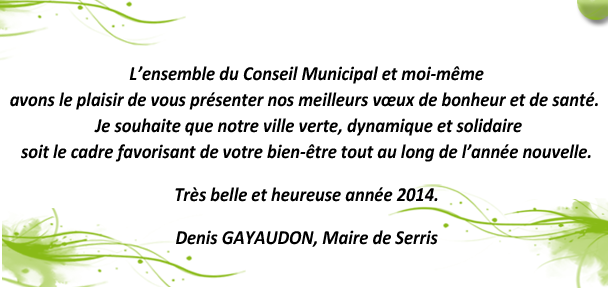
<style>
.page{position:relative;width:608px;height:288px;background:#ffffff}
.page>*{position:absolute;margin:0}
.t1{font:20px/26px "Calibri-BoldItalic";color:#000000;scale:0.92 1}
</style>
<div class="page">
<p class="t1" style="left:10px;top:66px;width:588px;height:181px;text-align:center">L’ensemble du Conseil Municipal et moi-même<br>avons le plaisir de vous présenter nos meilleurs vœux de bonheur et de santé. <br> Je souhaite que notre ville verte, dynamique et solidaire<br>soit le cadre favorisant de votre bien-être tout au long de l’année nouvelle.<br><br>Très belle et heureuse année 2014.<br><br>Denis GAYAUDON, Maire de Serris</p>
</div>
